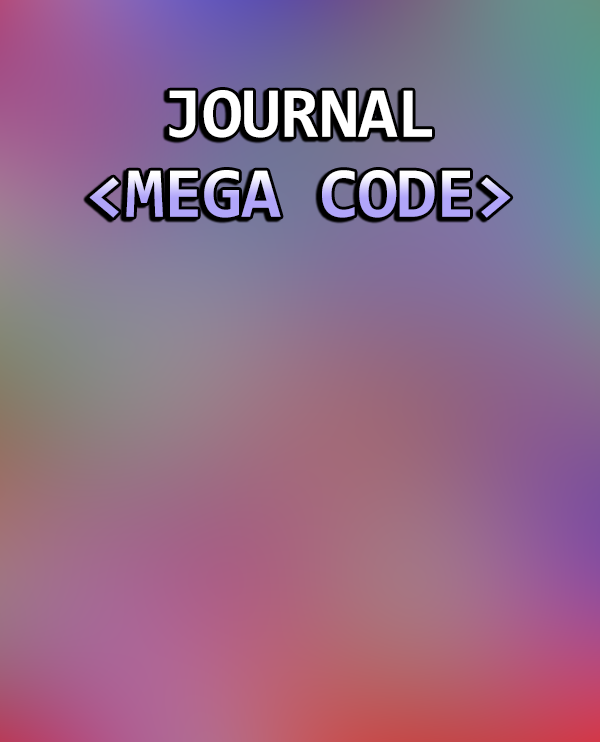
<style>
.page{position:relative;width:600px;height:742px}
.page>*{position:absolute;margin:0}
.t1{font:72px/16px "Consolas-Bold";letter-spacing:-0.01em;text-transform:uppercase}
</style>
<div class="page">
<p class="t1" style="left:89px;top:90px;width:422px;height:128px;text-align:center">journal<br><br><br><br><br>&lt;MeGA CODE&gt;</p>
</div>
